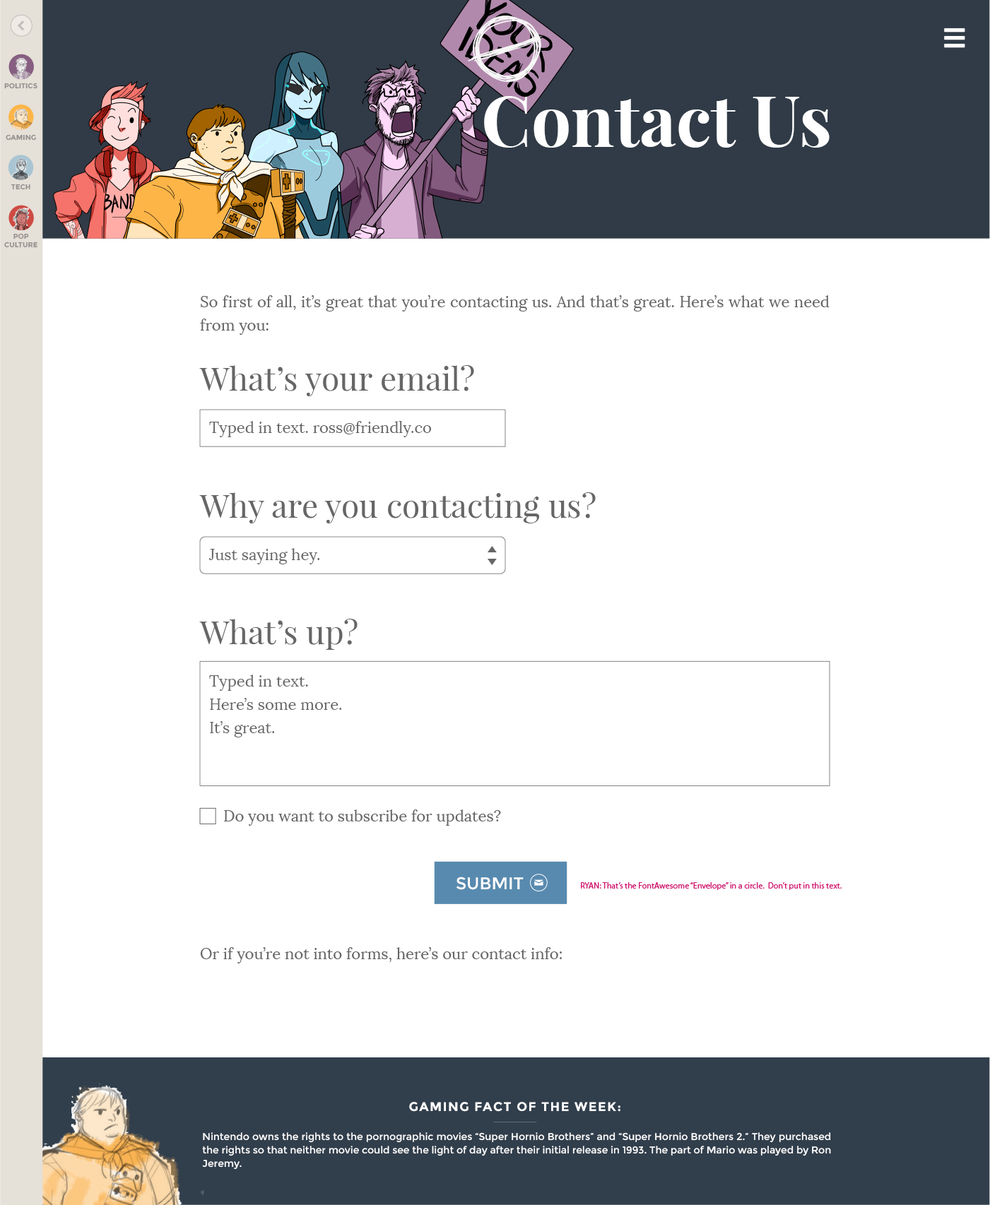
<style>
.page{position:relative;width:990px;height:1205px;background:#ffffff}
.page>*{position:absolute;margin:0}
.t1{font:7.1px "Montserrat-Bold";color:#96918f}
.t2{font:70.6px "PlayfairDisplay-Bold";color:#ffffff}
.t3{font:15.5px/23.3px "Lora-Regular";color:#666666}
.t4{font:32.5px "PlayfairDisplay-Regular";color:#666666}
.t5{font:15.5px "Lora-Regular";color:#666666}
.t6{font:17px "Montserrat-Regular";color:#ffffff;text-transform:uppercase}
.t7{font:8.5px "MyriadPro-Regular";color:#cf1970}
.t8{font:12.7px "Montserrat-Bold";letter-spacing:0.08em;color:#ffffff;text-transform:uppercase}
.t9{font:9.9px/13.4px "Montserrat-Regular";color:#ffffff}
</style>
<div class="page">
<p class="t1" style="left:4px;top:83px;width:33px;height:6px">POLITICS</p>
<p class="t2" style="left:484px;top:96px;width:345px;height:52px">Contact Us</p>
<p class="t1" style="left:6px;top:134px;width:30px;height:7px">GAMING</p>
<p class="t1" style="left:11px;top:184px;width:19px;height:6px">TECH</p>
<p class="t1" style="left:4px;top:233px;width:33px;height:15px;text-align:center">POP<br>CULTURE</p>
<p class="t3" style="left:200px;top:295px;width:629px;height:40px;text-align:justify">So first of all, it’s great that you’re contacting us. And that’s great. Here’s what we need from you:</p>
<p class="t4" style="left:199px;top:365px;width:275px;height:31px">What’s your email?</p>
<p class="t5" style="left:209px;top:421px;width:223px;height:16px">Typed in text. ross@friendly.co</p>
<p class="t4" style="left:199px;top:492px;width:396px;height:31px">Why are you contacting us?</p>
<p class="t5" style="left:208px;top:548px;width:112px;height:16px">Just saying hey.</p>
<p class="t4" style="left:199px;top:619px;width:158px;height:31px">What’s up?</p>
<p class="t3" style="left:209px;top:675px;width:133px;height:62px;text-align:justify">Typed in text.<br>Here’s some more.<br>It’s great.</p>
<p class="t5" style="left:224px;top:809px;width:277px;height:17px">Do you want to subscribe for updates?</p>
<p class="t6" style="left:456px;top:877px;width:67px;height:13px">Submit</p>
<p class="t7" style="left:581px;top:882px;width:260px;height:8px">RYAN: That’s the FontAwesome “Envelope” in a circle.  Don’t put in this text.</p>
<p class="t5" style="left:200px;top:947px;width:362px;height:16px">Or if you’re not into forms, here’s our contact info:</p>
<p class="t8" style="left:409px;top:1102px;width:211px;height:10px">Gaming Fact Of The Week:</p>
<p class="t9" style="left:202px;top:1132px;width:629px;height:37px;text-align:justify">Nintendo owns the rights to the pornographic movies “Super Hornio Brothers” and “Super Hornio Brothers 2.” They purchased the rights so that neither movie could see the light of day after their initial release in 1993. The part of Mario was played by Ron Jeremy.</p>
</div>
